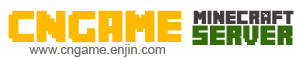
<style>
.page{position:relative;width:300px;height:60px;background:#ffffff}
.page>*{position:absolute;margin:0}
.t1{font:40px "Minecrafter";color:#ffba00}
.t2{font:17px "Minecrafter";color:#423d3d}
.t3{font:25px "Minecrafter";color:#346b0b}
.t4{font:13px "ArialMT";color:#706e67}
</style>
<div class="page">
<p class="t1" style="left:8px;top:10px;width:174px;height:33px">CNGAME</p>
<p class="t2" style="left:193px;top:10px;width:101px;height:14px">Minecraft</p>
<p class="t3" style="left:192px;top:25px;width:101px;height:20px">SERVER</p>
<p class="t4" style="left:29px;top:44px;width:137px;height:13px">www.cngame.enjin.com</p>
</div>
